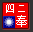
<style>
.page{position:relative;width:33px;height:32px;background:#f20000}
.page>*{position:absolute;margin:0}
.t1{font:10.4px "SimSun";color:#ffffff}
.t2{font:11.7px "SimSun";color:#ffffff}
</style>
<div class="page">
<p class="t1" style="left:6px;top:4px;width:19px;height:9px">四二</p>
<p class="t2" style="left:16px;top:15px;width:11px;height:12px">奉</p>
</div>
